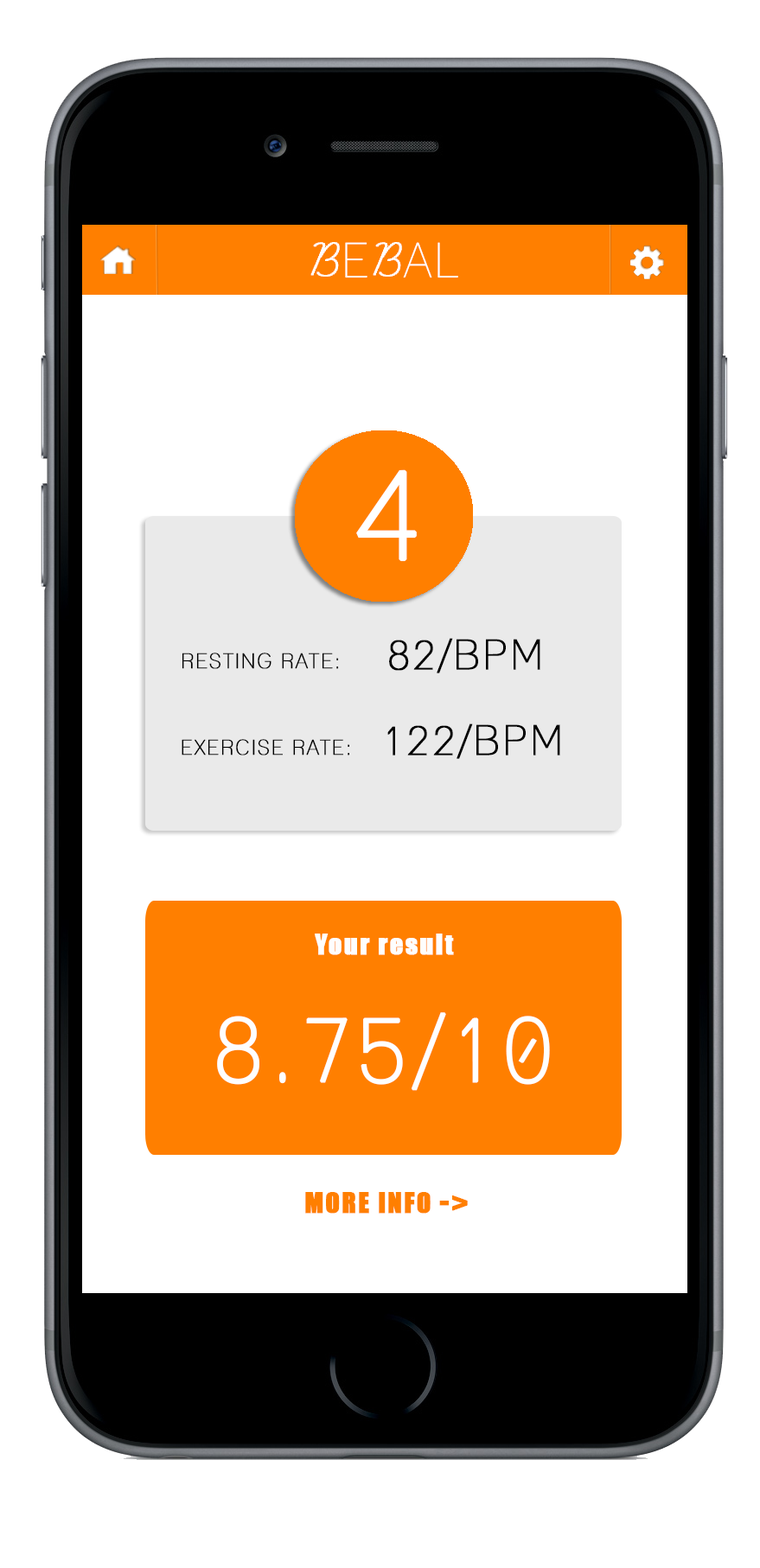
<style>
.page{position:relative;width:760px;height:1568px;background:#ffffff}
.page>*{position:absolute;margin:0}
.t1{font:48.3px "Lane-Narrow";letter-spacing:0.06em;color:#ffffff}
.t2{font:58px "LearningCurveDashedPro";letter-spacing:0.06em;color:#ffffff;font-weight:bold}
.t3{font:128.8px "Lane-Narrow";letter-spacing:0.06em;color:#ffffff;font-weight:bold}
.t4{font:41.5px "Lane-Narrow";letter-spacing:0.06em;color:#000000;font-weight:bold}
.t5{font:20.7px "Lane-Narrow";letter-spacing:0.06em;color:#000000;font-weight:bold}
.t6{font:25.9px "Impact";letter-spacing:0.06em;color:#fefefe;font-weight:bold}
.t7{font:91.6px "Lane-Narrow";letter-spacing:0.06em;color:#fefefe;font-weight:bold}
.t8{font:25.9px "Impact";letter-spacing:0.06em;color:#ff7f00;font-weight:bold}
.t9{font:31.1px "Impact";letter-spacing:0.06em;color:#ff7f00;font-weight:bold}
</style>
<div class="page">
<p class="t1" style="left:310px;top:242px;width:148px;height:36px"><span class="t2">B</span>E<span class="t2">B</span>AL</p>
<p class="t3" style="left:356px;top:469px;width:61px;height:93px">4</p>
<p class="t4" style="left:389px;top:638px;width:151px;height:35px">82/BPM</p>
<p class="t5" style="left:182px;top:653px;width:157px;height:16px">RESTING RATE:</p>
<p class="t4" style="left:387px;top:723px;width:173px;height:36px">122/BPM</p>
<p class="t5" style="left:182px;top:739px;width:168px;height:16px">EXERCISE RATE:</p>
<p class="t6" style="left:315px;top:934px;width:139px;height:21px">Your result</p>
<p class="t7" style="left:217px;top:1012px;width:333px;height:79px">8.75/10</p>
<p class="t8" style="left:305px;top:1192px;width:163px;height:22px">MORE INFO <span class="t9">-</span><span class="t9">&gt;</span></p>
</div>
